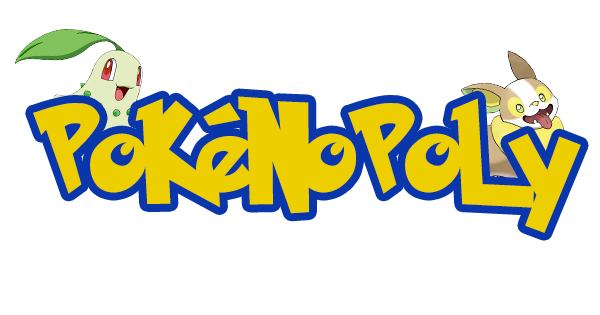
<style>
.page{position:relative;width:600px;height:315px;background:#ffffff}
.page>*{position:absolute;margin:0}
.t1{font:100px "PokemonSolidNormal";color:#edce00}
</style>
<div class="page">
<p class="t1" style="left:33px;top:96px;width:548px;height:137px">PoKéNoPoLy</p>
</div>
